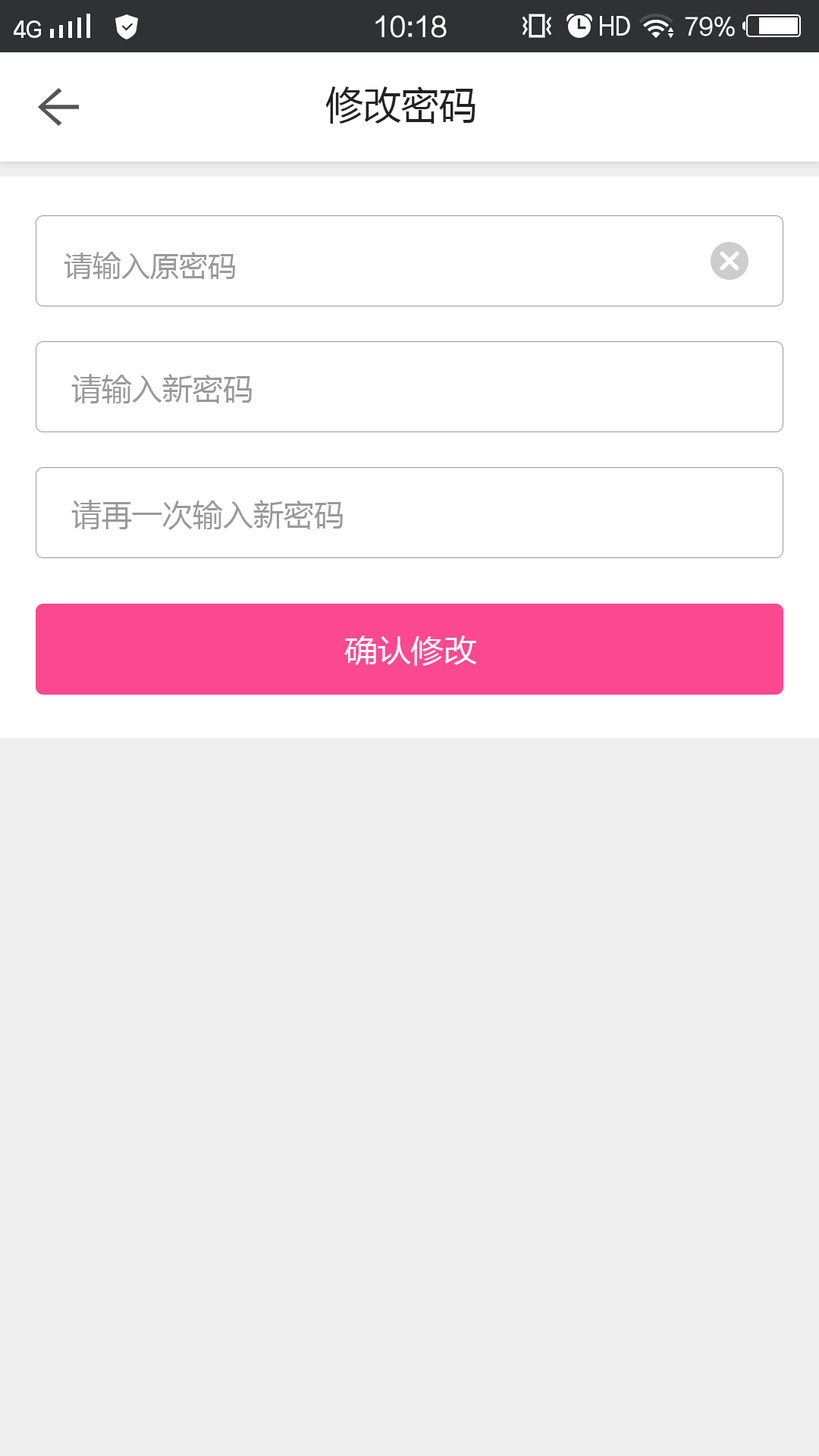
<style>
.page{position:relative;width:819px;height:1456px;background:#eeeeee}
.page>*{position:absolute;margin:0}
.t1{font:37.9px "MicrosoftYaHei";color:#222222}
.t2{font:28.8px "MicrosoftYaHei";color:#999999}
.t3{font:30.3px "MicrosoftYaHei";color:#999999}
.t4{font:30.3px "MicrosoftYaHei";color:#ffffff;scale:1.09 1}
</style>
<div class="page">
<p class="t1" style="left:325px;top:86px;width:150px;height:38px">修改密码</p>
<p class="t2" style="left:64px;top:252px;width:171px;height:28px">请输入原密码</p>
<p class="t3" style="left:71px;top:374px;width:181px;height:29px">请输入新密码</p>
<p class="t3" style="left:71px;top:500px;width:272px;height:30px">请再一次输入新密码</p>
<p class="t4" style="left:344px;top:635px;width:133px;height:31px">确认修改</p>
</div>
